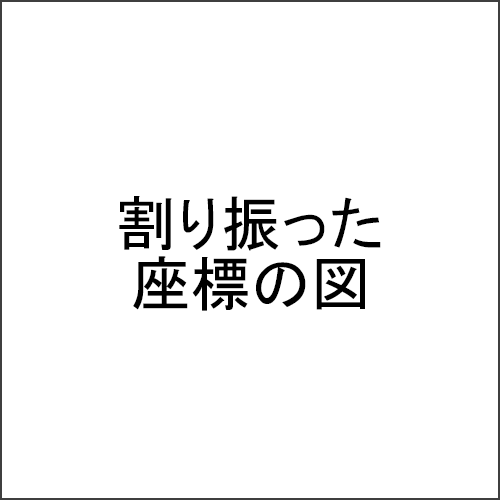
<style>
.page{position:relative;width:500px;height:500px;background:#ffffff}
.page>*{position:absolute;margin:0}
.t1{font:60px/60px "MS-PGothic";color:#000000}
</style>
<div class="page">
<p class="t1" style="left:119px;top:196px;width:262px;height:115px;text-align:center">割り振った<br>座標の図</p>
</div>
